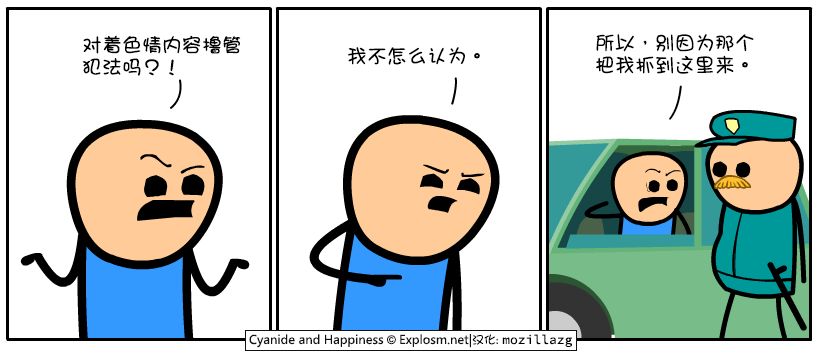
<style>
.page{position:relative;width:820px;height:355px;background:#ffffff}
.page>*{position:absolute;margin:0}
.t1{font:20px/22px "DFGirl";color:#000000}
.t2{font:20px "DFGirl";color:#000000}
</style>
<div class="page">
<p class="t1" style="left:82px;top:35px;width:159px;height:41px">对着色情内容撸管<br>犯法吗？！</p>
<p class="t1" style="left:596px;top:34px;width:158px;height:40px">所以，别因为那个<br>把我抓到这里来。</p>
<p class="t2" style="left:347px;top:47px;width:133px;height:18px">我不怎么认为。</p>
</div>
